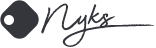
<style>
.page{position:relative;width:156px;height:48px;background:#ffffff}
.page>*{position:absolute;margin:0}
.t1{font:43.2px "Beauty";color:#34363c}
</style>
<div class="page">
<p class="t1" style="left:41px;top:3px;width:113px;height:44px">Nyks</p>
</div>
